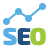
<style>
.page{position:relative;width:48px;height:48px;background:#ffffff}
.page>*{position:absolute;margin:0}
.t1{font:24.4px "Exo2-Black";letter-spacing:-0.04em;color:#59afe2}
.t2{font:24.4px "Exo2-Black";letter-spacing:-0.04em;color:#205081}
.t3{font:24.4px "Exo2-Black";letter-spacing:-0.04em;color:#9ec83b}
</style>
<div class="page">
<p class="t1" style="left:3px;top:27px;width:43px;height:19px">S<span class="t2">E</span><span class="t3">O</span></p>
</div>
